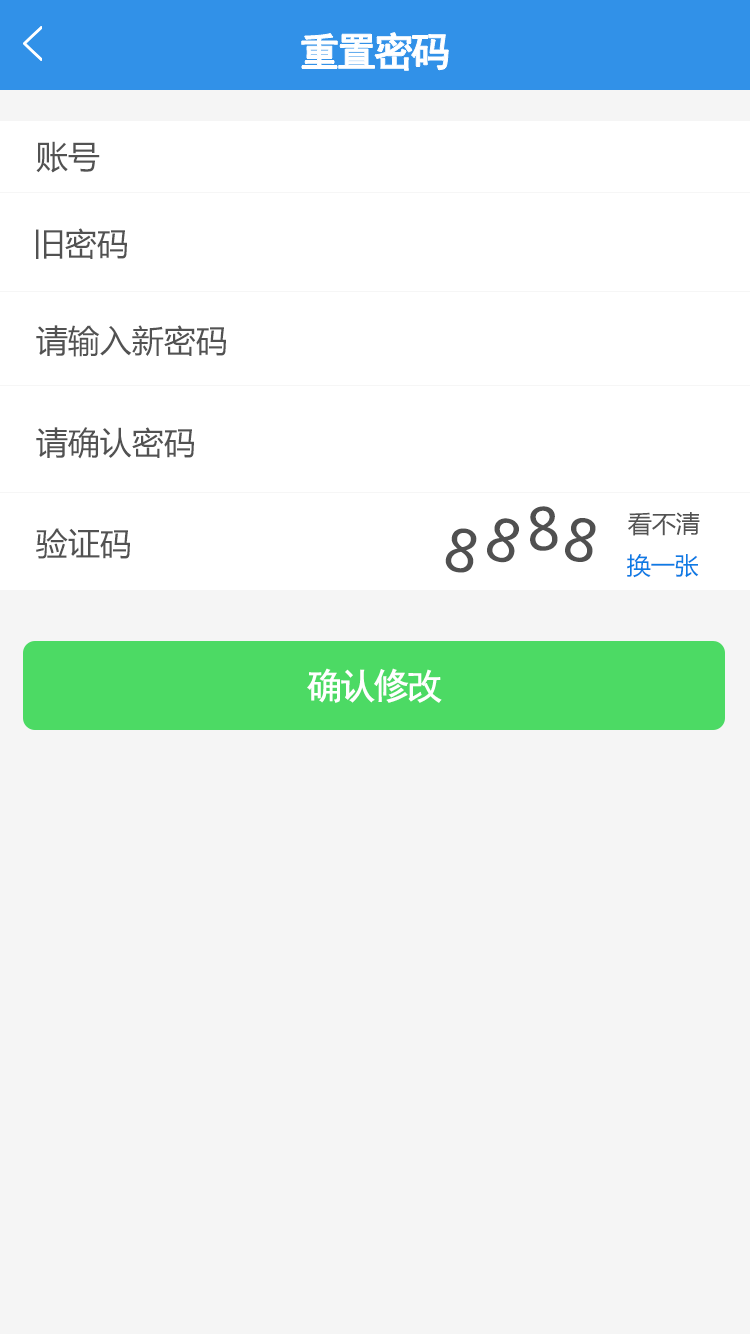
<style>
.page{position:relative;width:750px;height:1334px;background:#f5f5f5}
.page>*{position:absolute;margin:0}
.t1{font:40px "SimHei";letter-spacing:-0.1em;color:#ffffff;font-weight:bold}
.t2{font:32px "MicrosoftYaHei";color:#525252}
.t3{font:56.9px "MicrosoftYaHei";color:#505050}
.t4{font:24px "MicrosoftYaHei";color:#525252}
.t5{font:24px "MicrosoftYaHei";color:#0d7ce4}
.t6{font:36px "SimHei";letter-spacing:-0.1em;color:#ffffff;font-weight:bold}
</style>
<div class="page">
<p class="t1" style="left:301px;top:32px;width:148px;height:39px">重置密码</p>
<p class="t2" style="left:36px;top:141px;width:64px;height:32px">账号</p>
<p class="t2" style="left:36px;top:228px;width:91px;height:31px">旧密码</p>
<p class="t2" style="left:36px;top:325px;width:190px;height:32px">请输入新密码</p>
<p class="t2" style="left:36px;top:427px;width:158px;height:32px">请确认密码</p>
<p class="t3" style="left:530px;top:506px;width:28px;height:45px;rotate:-3deg">8</p>
<p class="t3" style="left:487px;top:518px;width:32px;height:45px;rotate:15deg">8</p>
<p class="t3" style="left:565px;top:518px;width:31px;height:44px;rotate:11deg">8</p>
<p class="t4" style="left:628px;top:512px;width:72px;height:24px">看不清</p>
<p class="t2" style="left:36px;top:528px;width:94px;height:31px">验证码</p>
<p class="t3" style="left:445px;top:528px;width:32px;height:45px;rotate:11deg">8</p>
<p class="t5" style="left:627px;top:554px;width:72px;height:24px">换一张</p>
<p class="t6" style="left:307px;top:668px;width:135px;height:35px">确认修改</p>
</div>
